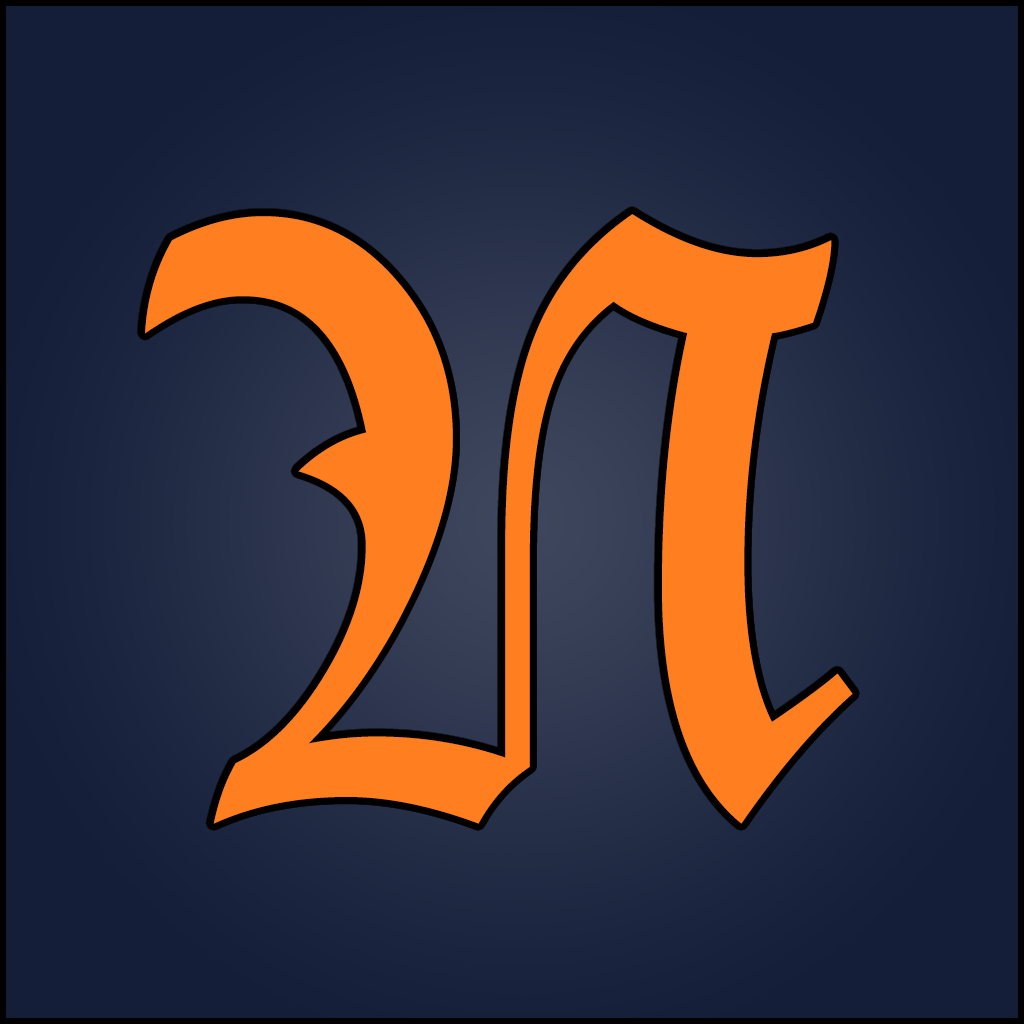
<style>
.page{position:relative;width:1024px;height:1024px}
.page>*{position:absolute;margin:0}
.t1{font:800px "LucidaBlackletter";color:#ff7f20}
</style>
<div class="page">
<p class="t1" style="left:145px;top:214px;width:708px;height:610px">N</p>
</div>
